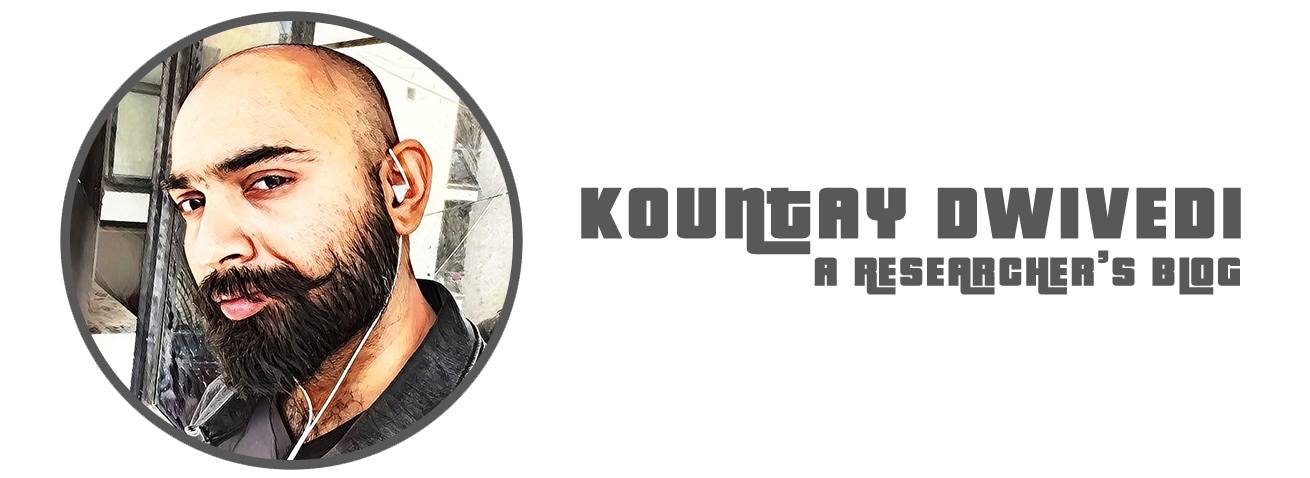
<style>
.page{position:relative;width:1310px;height:478px;background:#ffffff}
.page>*{position:absolute;margin:0}
.t1{font:78.9px "PricedownBl-Regular";letter-spacing:0.06em;color:#585858;text-transform:uppercase;scale:1.06 1}
.t2{font:43.9px "PricedownBl-Regular";letter-spacing:0.06em;color:#585858;text-transform:uppercase;scale:1.06 1}
</style>
<div class="page">
<p class="t1" style="left:581px;top:187px;width:660px;height:68px">Kountay Dwivedi</p>
<p class="t2" style="left:814px;top:250px;width:426px;height:45px">A researcher’s blog</p>
</div>
